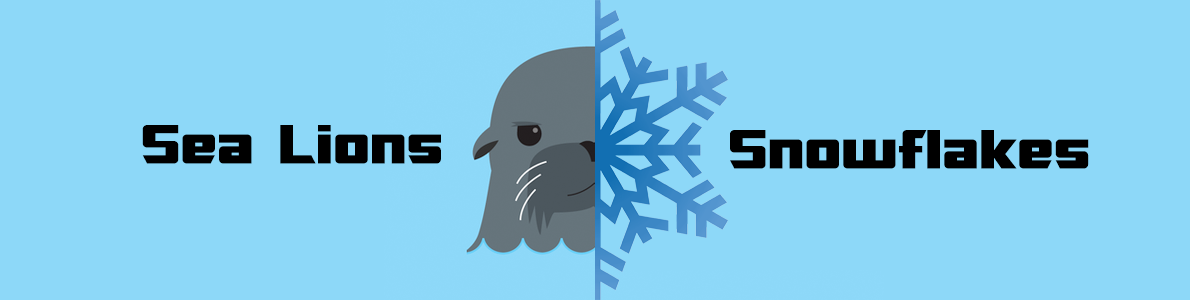
<style>
.page{position:relative;width:1190px;height:300px;background:#8dd8f8}
.page>*{position:absolute;margin:0}
.t1{font:55px "SFTransRoboticsExtended";color:#000000}
</style>
<div class="page">
<p class="t1" style="left:142px;top:125px;width:299px;height:39px">Sea Lions</p>
<p class="t1" style="left:730px;top:130px;width:359px;height:39px">Snowflakes</p>
</div>
